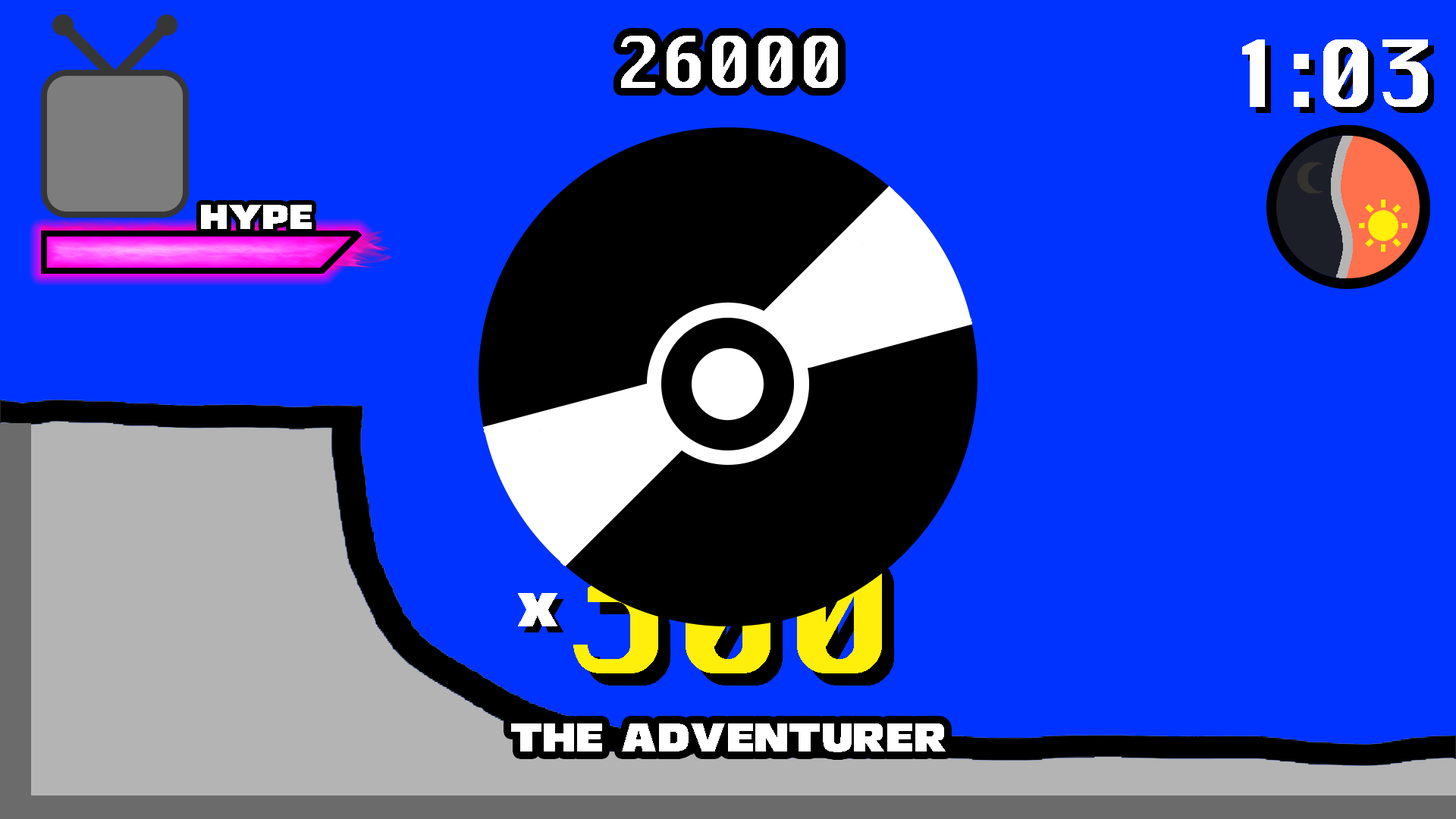
<style>
.page{position:relative;width:1456px;height:819px;background:#0033ff}
.page>*{position:absolute;margin:0}
.t1{font:69.5px "Silom";letter-spacing:-0.01em;color:#ffffff}
.t2{font:50.6px "VortexianRegular";letter-spacing:-0.01em;color:#ffffff}
.t3{font:170.6px "Silom";letter-spacing:-0.01em}
.t4{font:69.5px "VortexianRegular";letter-spacing:-0.01em;color:#ffffff}
.t5{font:58.9px "VortexianRegular";letter-spacing:-0.01em;color:#ffffff}
</style>
<div class="page">
<p class="t1" style="left:621px;top:36px;width:217px;height:52px">26000</p>
<p class="t2" style="left:201px;top:205px;width:111px;height:24px">HYPE</p>
<p class="t3" style="left:573px;top:545px;width:309px;height:128px">300</p>
<p class="t4" style="left:518px;top:593px;width:39px;height:33px">X</p>
<p class="t5" style="left:511px;top:723px;width:435px;height:29px">THE ADVENTURER</p>
</div>
